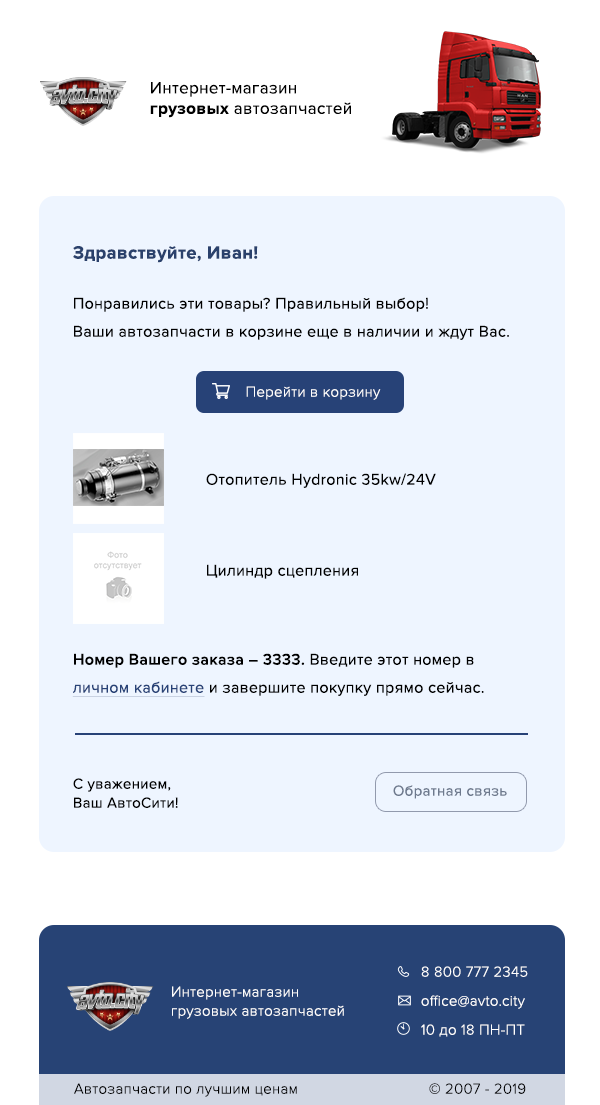
<style>
.page{position:relative;width:600px;height:1105px;background:#eef5ff}
.page>*{position:absolute;margin:0}
.t1{font:17px "ProximaNova-Regular";letter-spacing:0.02em;color:#000000}
.t2{font:17px "ProximaNova-Bold";letter-spacing:0.02em;color:#000000}
.t3{font:18.4px "ProximaNova-Bold";letter-spacing:0.02em;color:#2a416c}
.t4{font:16px/28px "ProximaNova-Regular";letter-spacing:0.02em;color:#000000}
.t5{font:15px "ProximaNova-Light";letter-spacing:0.02em;color:#ffffff}
.t6{font:16px "ProximaNova-Regular";letter-spacing:0.02em;color:#000000}
.t7{font:16px/28px "ProximaNova-Semibold";letter-spacing:0.02em;color:#000000}
.t8{font:16px/28px "ProximaNova-Regular";letter-spacing:0.02em;color:#274277;text-decoration:underline}
.t9{font:15px/19px "ProximaNova-Regular";letter-spacing:0.02em;color:#000000}
.t10{font:15px "ProximaNova-Regular";letter-spacing:0.02em;color:#6d798d}
.t11{font:15px/29px "ProximaNova-Light";letter-spacing:0.02em;color:#ffffff}
.t12{font:15px/19px "ProximaNova-Light";letter-spacing:0.02em;color:#ffffff}
.t13{font:15px "ProximaNova-Light";letter-spacing:0.02em;color:#000000}
</style>
<div class="page">
<p class="t1" style="left:150px;top:82px;width:201px;height:36px">Интернет-магазин<br><span class="t2">грузовых </span>автозапчастей</p>
<p class="t3" style="left:73px;top:246px;width:185px;height:17px">Здравствуйте, Иван!</p>
<p class="t4" style="left:74px;top:297px;width:435px;height:43px">Понравились эти товары? Правильный выбор! <br>Ваши автозапчасти в корзине еще в наличии и ждут Вас.</p>
<p class="t5" style="left:246px;top:386px;width:135px;height:14px">Перейти в корзину</p>
<p class="t6" style="left:206px;top:473px;width:230px;height:15px">Отопитель Hydronic 35kw/24V</p>
<p class="t6" style="left:207px;top:564px;width:151px;height:15px">Цилиндр сцепления</p>
<p class="t4" style="left:72px;top:653px;width:412px;height:44px"><span class="t7">Номер Вашего заказа – 3333.</span> Введите этот номер в <span class="t8">личном кабинете</span> и завершите покупку прямо сейчас.</p>
<p class="t9" style="left:73px;top:778px;width:105px;height:30px">С уважением,<br>Ваш АвтоСити!</p>
<p class="t10" style="left:393px;top:785px;width:114px;height:14px">Обратная связь</p>
<p class="t11" style="left:421px;top:966px;width:107px;height:71px">8 800 777 2345<br>office@avto.city<br>10 до 18 ПН-ПТ</p>
<p class="t12" style="left:172px;top:986px;width:172px;height:33px">Интернет-магазин<br>грузовых автозапчастей</p>
<p class="t13" style="left:74px;top:1083px;width:223px;height:14px">Автозапчасти по лучшим ценам</p>
<p class="t13" style="left:429px;top:1083px;width:97px;height:11px">© 2007 - 2019</p>
</div>
